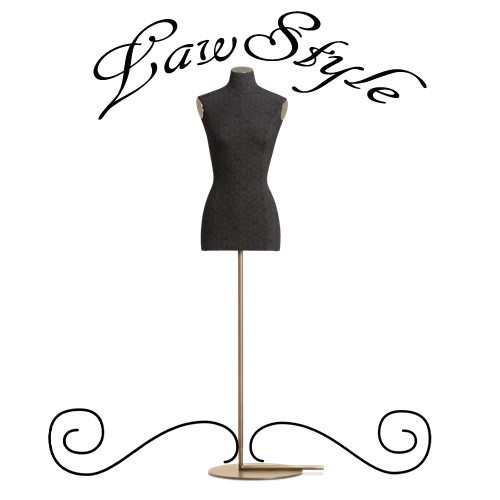
<style>
.page{position:relative;width:500px;height:500px;background:#ffffff}
.page>*{position:absolute;margin:0}
.t1{font:80px "ARDECODE";color:#050505}
</style>
<div class="page">
<p class="t1" style="left:93px;top:11px;width:334px;height:109px">LawStyle</p>
</div>
